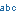
<style>
.page{position:relative;width:16px;height:16px;background:#ffffff}
.page>*{position:absolute;margin:0}
.t1{font:10px "ArialMT";color:#206aa3}
</style>
<div class="page">
<p class="t1" style="left:0px;top:4px;width:16px;height:7px">abc</p>
</div>
